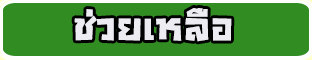
<style>
.page{position:relative;width:312px;height:60px;background:#318c22}
.page>*{position:absolute;margin:0}
.t1{font:48px "-LayijiTaMaiTine1";color:#edecf3}
</style>
<div class="page">
<p class="t1" style="left:74px;top:8px;width:158px;height:34px">ช่วยเหลือ</p>
</div>
